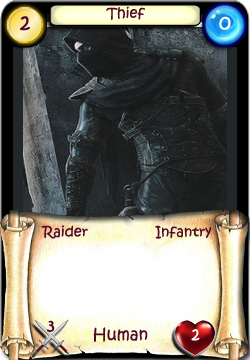
<style>
.page{position:relative;width:250px;height:360px}
.page>*{position:absolute;margin:0}
.t1{font:14px "KristenITC-Regular";color:#51092d}
.t2{font:20px "KristenITC-Regular";color:#51092d}
.t3{font:20px "KristenITC-Regular";color:#ffffff}
.t4{font:16px "KristenITC-Regular";color:#51092d}
.t5{font:16px "KristenITC-Regular";color:#fefefe}
</style>
<div class="page">
<p class="t1" style="left:106px;top:6px;width:40px;height:14px">Thief</p>
<p class="t2" style="left:20px;top:16px;width:10px;height:15px">2</p>
<p class="t3" style="left:219px;top:16px;width:12px;height:14px">0</p>
<p class="t1" style="left:41px;top:225px;width:47px;height:14px">Raider</p>
<p class="t1" style="left:155px;top:225px;width:57px;height:14px">Infantry</p>
<p class="t4" style="left:47px;top:320px;width:8px;height:12px">3</p>
<p class="t4" style="left:93px;top:327px;width:55px;height:15px">Human</p>
<p class="t5" style="left:191px;top:329px;width:9px;height:12px">2</p>
</div>
